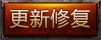
<style>
.page{position:relative;width:101px;height:40px}
.page>*{position:absolute;margin:0}
.t1{font:19.4px "MicrosoftYaHeiUI";letter-spacing:0.025em}
</style>
<div class="page">
<p class="t1" style="left:9px;top:9px;width:81px;height:19px">更新修复</p>
</div>
